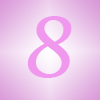
<style>
.page{position:relative;width:100px;height:100px}
.page>*{position:absolute;margin:0}
.t1{font:83.3px "LucidaHandwriting-Italic";color:#f098ed}
</style>
<div class="page">
<p class="t1" style="left:27px;top:16px;width:45px;height:62px">8</p>
</div>
